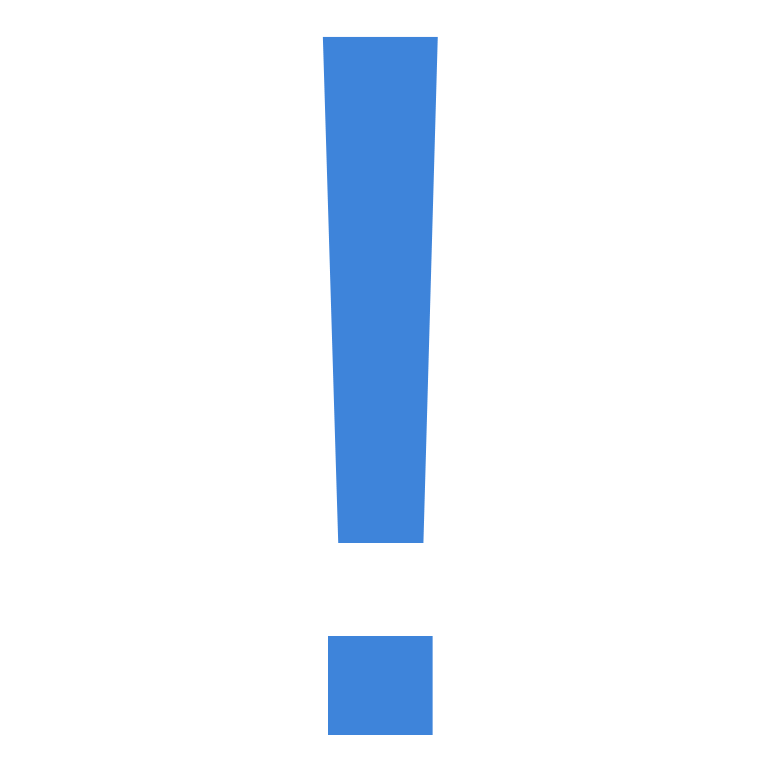
<style>
.page{position:relative;width:760px;height:760px;background:#ffffff}
.page>*{position:absolute;margin:0}
.t1{font:960px "Tahoma";color:#3e84da;scale:1.09 1}
</style>
<div class="page">
<p class="t1" style="left:322px;top:36px;width:116px;height:699px">!</p>
</div>
